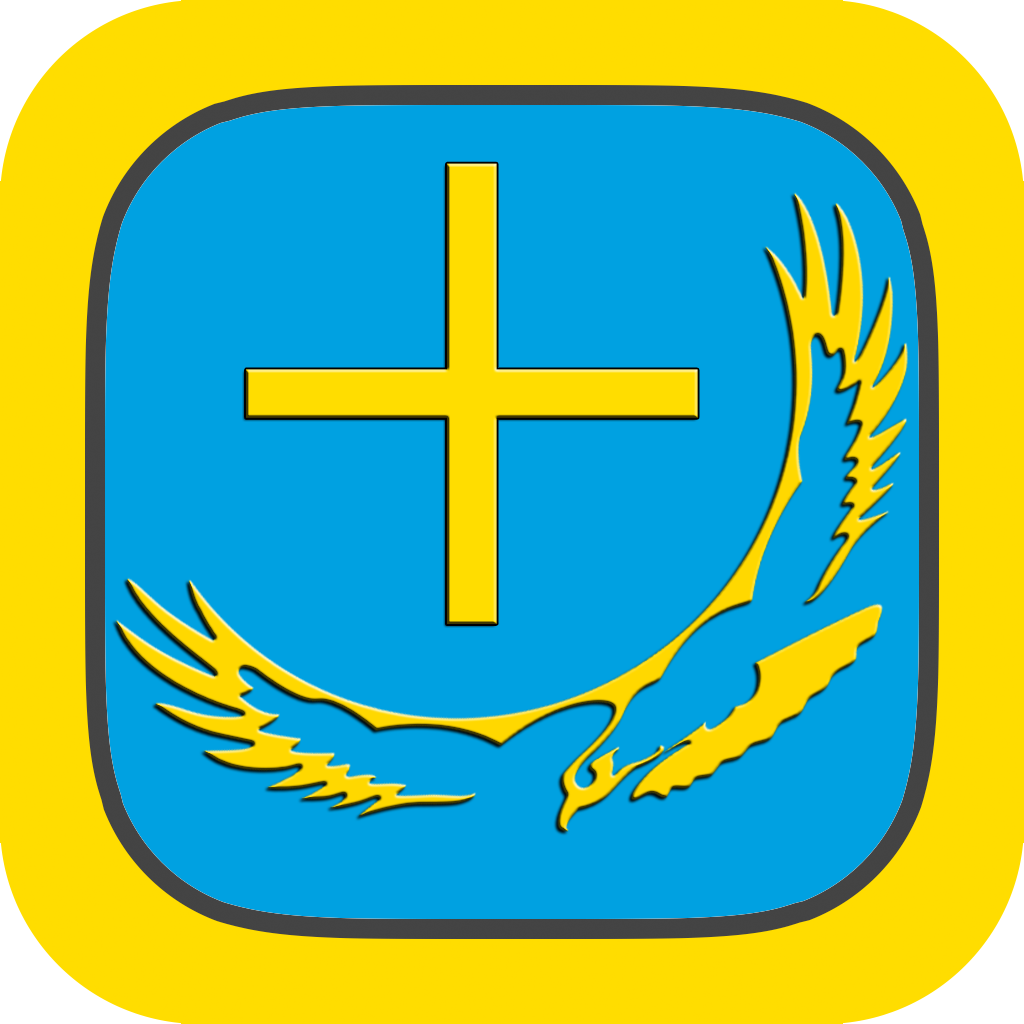
<style>
.page{position:relative;width:1024px;height:1024px;background:#00a1e1}
.page>*{position:absolute;margin:0}
.t1{font:688.1px "UKIJMoyQelem";color:#ffdd00}
</style>
<div class="page">
<p class="t1" style="left:246px;top:163px;width:452px;height:461px">+</p>
</div>
